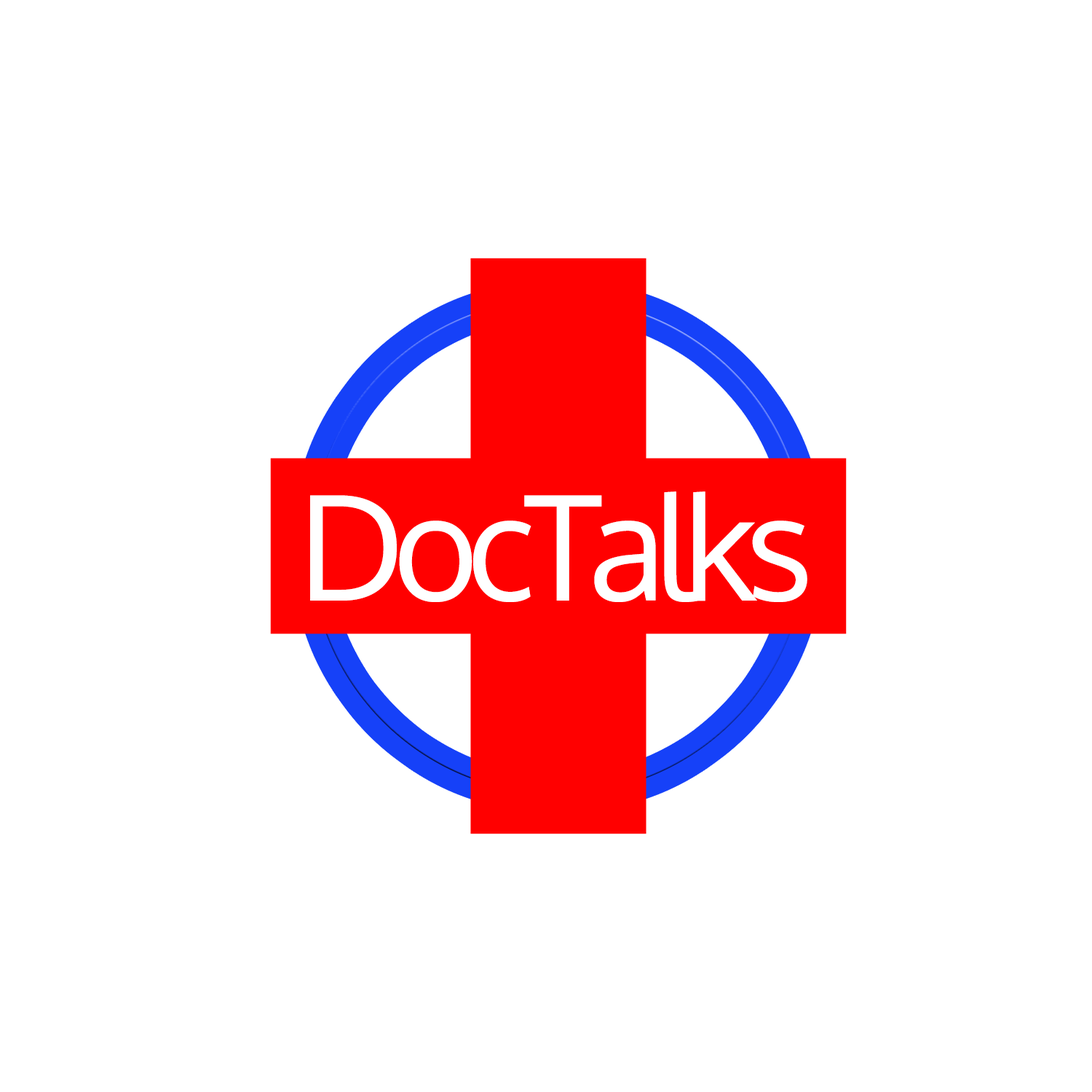
<style>
.page{position:relative;width:1092px;height:1092px;background:#ffffff}
.page>*{position:absolute;margin:0}
.t1{font:145.6px "Oxygen-Regular";letter-spacing:-0.08em;color:#ffffff}
</style>
<div class="page">
<p class="t1" style="left:310px;top:491px;width:497px;height:111px">DocTalks</p>
</div>
